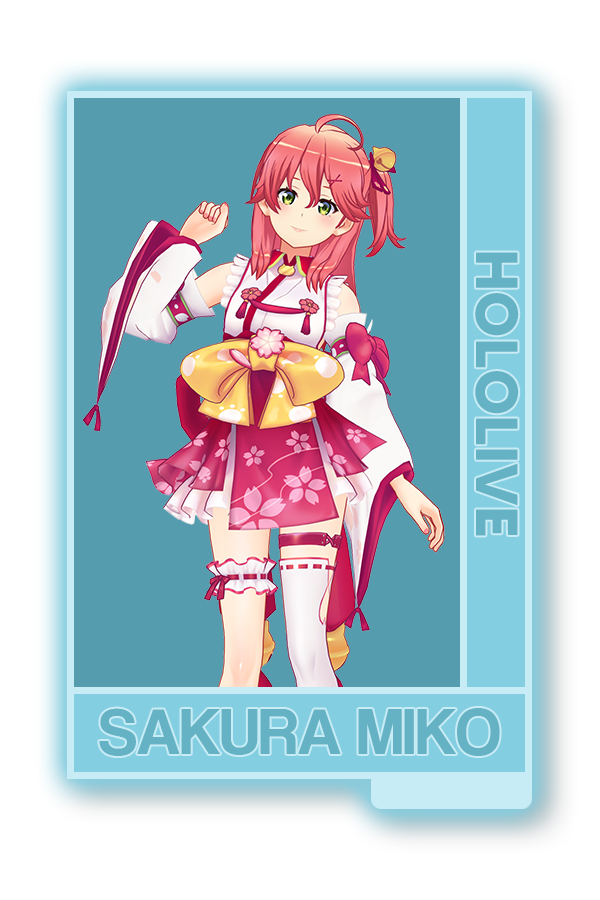
<style>
.page{position:relative;width:600px;height:900px;background:#549cae}
.page>*{position:absolute;margin:0}
.t1{font:59.2px "MADETOMMY-Bold";color:#66b2c5}
.t2{font:66.9px "CoolveticaRg-Regular";color:#66b2c5}
</style>
<div class="page">
<p class="t1" style="left:475px;top:252px;width:44px;height:284px;rotate:90deg">HOLOLIVE</p>
<p class="t2" style="left:99px;top:708px;width:401px;height:48px">SAKURA MIKO</p>
</div>
